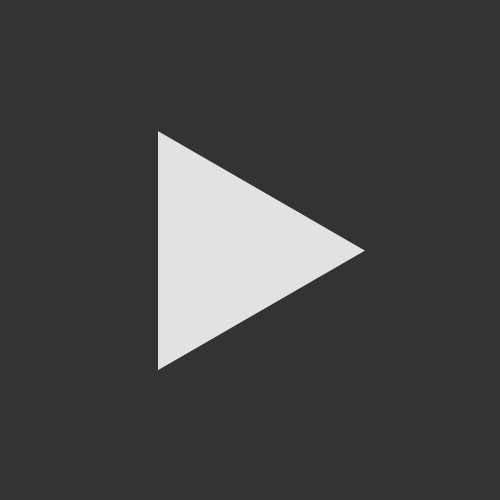
<style>
.page{position:relative;width:500px;height:500px;background:#333333}
.page>*{position:absolute;margin:0}
.t1{font:254px "KozGoPr6N-Regular";color:#e2e2e2}
</style>
<div class="page">
<p class="t1" style="left:158px;top:131px;width:207px;height:240px;rotate:90deg">▲</p>
</div>
